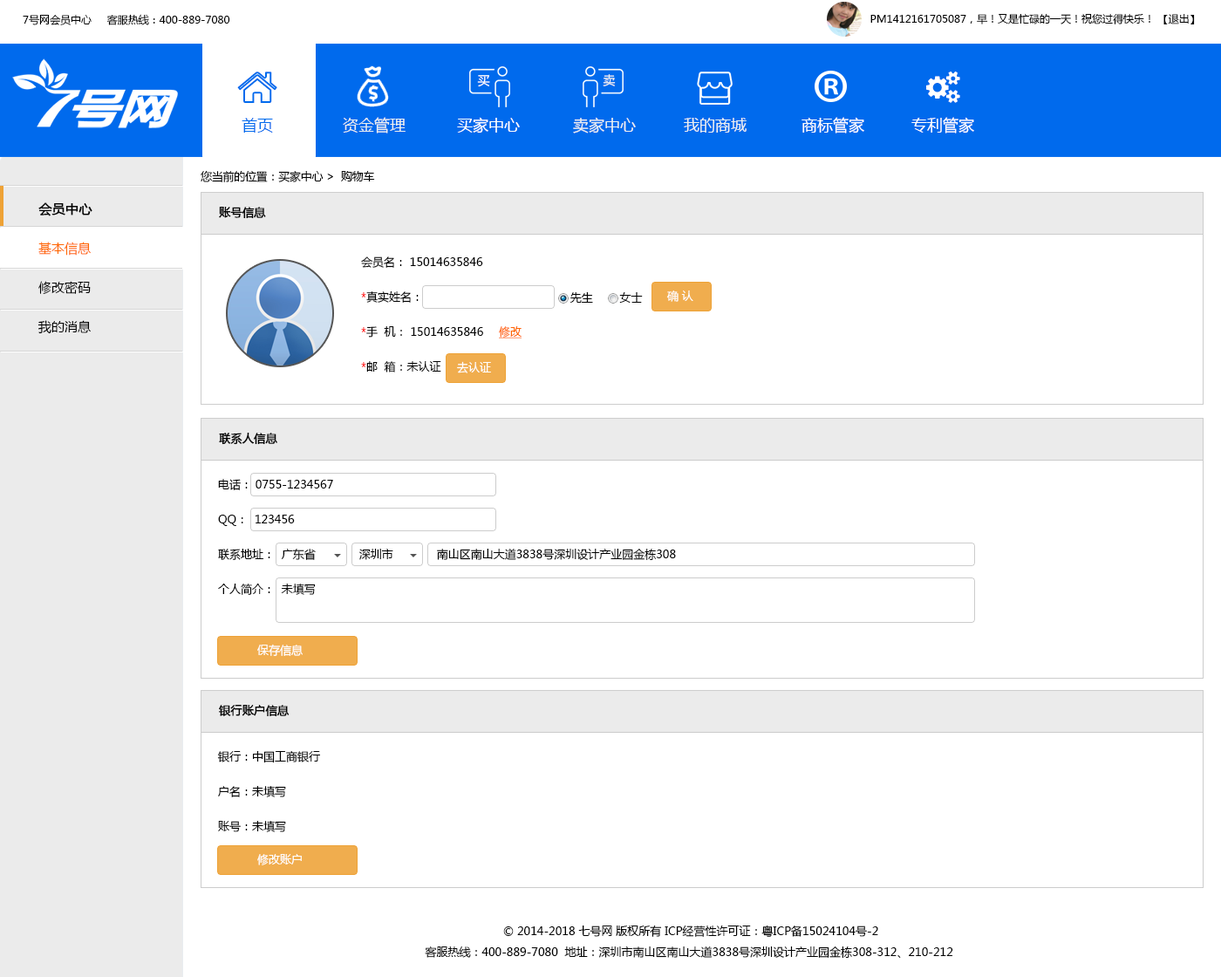
<style>
.page{position:relative;width:1221px;height:977px;background:#ffffff}
.page>*{position:absolute;margin:0}
.t1{font:10.5px "MicrosoftYaHei";color:#000000}
.t2{font:12.2px "MicrosoftYaHei";color:#ffffff}
.t3{font:12.2px "MicrosoftYaHei";color:#ecf0f1}
.t4{font:15.7px "MicrosoftYaHei";color:#006aed}
.t5{font:15.7px "MicrosoftYaHei";color:#ecf0f1}
.t6{font:15.7px "MicrosoftYaHei";color:#ffffff}
.t7{font:11.3px "MicrosoftYaHei";letter-spacing:-0.02em;color:#000000}
.t8{font:13.1px/39.2px "MicrosoftYaHei";color:#000000}
.t9{font:13.1px/39.2px "MicrosoftYaHei";color:#000000;font-weight:bold}
.t10{font:13.1px/39.2px "MicrosoftYaHei";color:#ff6600}
.t11{font:11.3px "MicrosoftYaHei";color:#000000;font-weight:bold}
.t12{font:11.3px/34.9px "MicrosoftYaHei";color:#000000}
.t13{font:11.3px/34.9px "MicrosoftYaHei";color:#ff0000}
.t14{font:11.3px "MicrosoftYaHei";color:#000000}
.t15{font:11.3px "MicrosoftYaHei";color:#ffffff}
.t16{font:11.3px "MicrosoftYaHei";color:#ff6600;text-decoration:underline}
.t17{font:11.3px/20.9px "MicrosoftYaHei";color:#000000}
</style>
<div class="page">
<p class="t1" style="left:23px;top:14px;width:207px;height:11px">7号网会员中心     客服热线：400-889-7080</p>
<p class="t1" style="left:870px;top:14px;width:325px;height:10px">PM1412161705087，早！又是忙碌的一天！祝您过得快乐！ 【退出】</p>
<p class="t2" style="left:477px;top:75px;width:13px;height:12px">买</p>
<p class="t3" style="left:603px;top:74px;width:13px;height:12px">卖</p>
<p class="t4" style="left:242px;top:118px;width:31px;height:15px">首页</p>
<p class="t5" style="left:343px;top:117px;width:63px;height:16px">资金管理</p>
<p class="t6" style="left:457px;top:117px;width:63px;height:16px">买家中心</p>
<p class="t5" style="left:573px;top:117px;width:63px;height:16px">卖家中心</p>
<p class="t5" style="left:684px;top:118px;width:62px;height:15px">我的商城</p>
<p class="t6" style="left:801px;top:117px;width:63px;height:16px">商标管家</p>
<p class="t6" style="left:911px;top:117px;width:63px;height:16px">专利管家</p>
<p class="t7" style="left:201px;top:170px;width:174px;height:12px">您当前的位置：买家中心 &gt;  购物车</p>
<p class="t8" style="left:37px;top:202px;width:55px;height:132px"><span class="t9">会员中心<br></span><span class="t10">基本信息<br></span>修改密码<br>我的消息</p>
<p class="t11" style="left:219px;top:207px;width:47px;height:12px">账号信息</p>
<p class="t12" style="left:361px;top:256px;width:122px;height:116px">会员名： 15014635846<br><span class="t13">*</span>真实姓名：<br><span class="t13">*</span>手  机： 15014635846<br><span class="t13">*</span>邮  箱：未认证</p>
<p class="t14" style="left:569px;top:292px;width:74px;height:11px">先生        女士</p>
<p class="t15" style="left:666px;top:290px;width:27px;height:12px">确 认</p>
<p class="t16" style="left:499px;top:326px;width:22px;height:12px">修改</p>
<p class="t15" style="left:457px;top:361px;width:34px;height:12px">去认证</p>
<p class="t11" style="left:219px;top:433px;width:58px;height:12px">联系人信息</p>
<p class="t12" style="left:218px;top:479px;width:458px;height:116px">电话： 0755-1234567<br>QQ：  123456<br>联系地址：  广东省             深圳市             南山区南山大道3838号深圳设计产业园金栋308<br>个人简介：  未填写</p>
<p class="t15" style="left:257px;top:644px;width:46px;height:12px">保存信息</p>
<p class="t11" style="left:219px;top:705px;width:71px;height:12px">银行账户信息</p>
<p class="t12" style="left:217px;top:751px;width:103px;height:81px">银行：中国工商银行 <br>户名：未填写<br>账号：未填写</p>
<p class="t15" style="left:257px;top:854px;width:45px;height:11px">修改账户</p>
<p class="t17" style="left:425px;top:924px;width:528px;height:34px;text-align:center">© 2014-2018 七号网 版权所有 ICP经营性许可证：粤ICP备15024104号-2<br>客服热线：400-889-7080  地址：深圳市南山区南山大道3838号深圳设计产业园金栋308-312、210-212</p>
</div>
